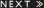
<style>
.page{position:relative;width:44px;height:8px;background:#1e1e1e}
.page>*{position:absolute;margin:0}
.t1{font:9px "GillSans";letter-spacing:0.2em;color:#ffffff;font-weight:bold}
.t2{font:11px "HiraKakuPro-W3";letter-spacing:0.1em;color:#ffffff}
</style>
<div class="page">
<p class="t1" style="left:0px;top:0px;width:43px;height:8px">NEXT <span class="t2">≫</span></p>
</div>
